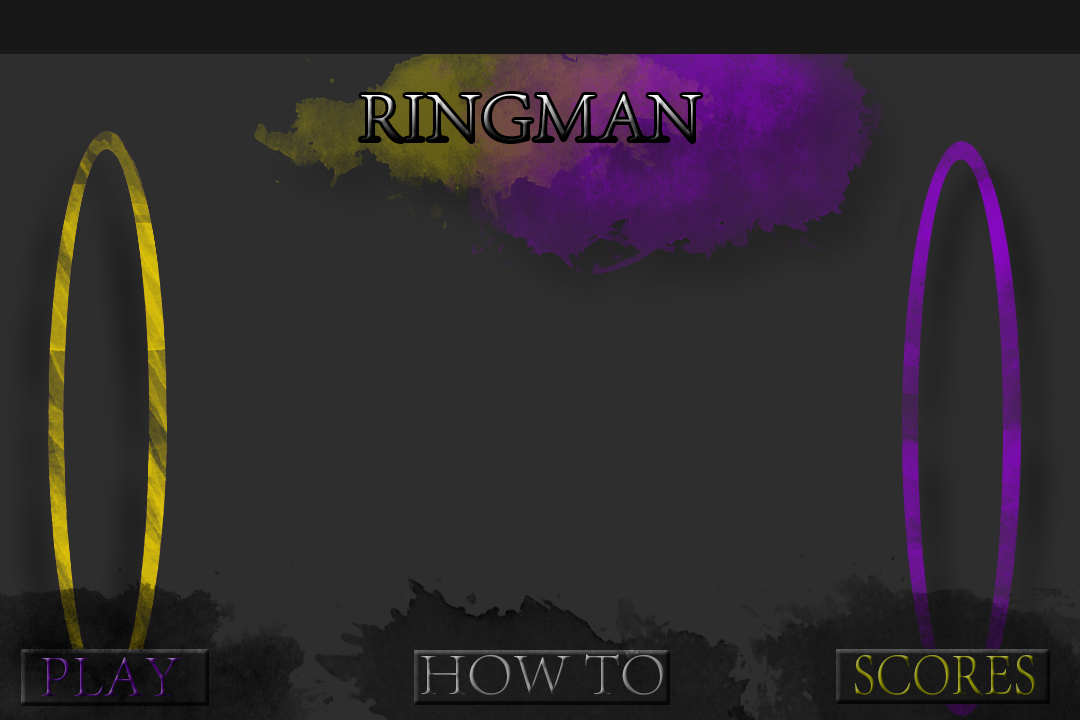
<style>
.page{position:relative;width:1080px;height:720px;background:#2e2e2e}
.page>*{position:absolute;margin:0}
.t1{font:72px "AdobeSongStd-Light"}
.t2{font:60px "AdobeSongStd-Light"}
.t3{font:60px "AdobeSongStd-Light";scale:0.86 1}
</style>
<div class="page">
<p class="t1" style="left:361px;top:94px;width:340px;height:47px">RINGMAN</p>
<p class="t2" style="left:421px;top:654px;width:243px;height:41px">HOW TO</p>
<p class="t2" style="left:41px;top:657px;width:140px;height:39px">PLAY</p>
<p class="t3" style="left:855px;top:655px;width:180px;height:40px">SCORES</p>
</div>
